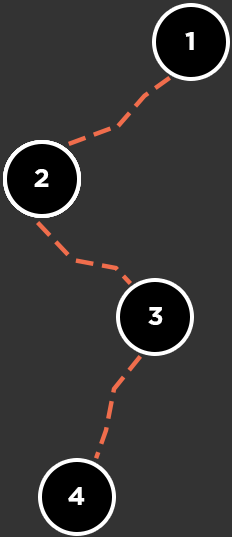
<style>
.page{position:relative;width:232px;height:537px;background:#333333}
.page>*{position:absolute;margin:0}
.t1{font:26px "HomepageBaukasten-Bold";letter-spacing:0.08em;color:#ffffff}
</style>
<div class="page">
<p class="t1" style="left:185px;top:32px;width:9px;height:18px">1</p>
<p class="t1" style="left:34px;top:169px;width:15px;height:18px">2</p>
<p class="t1" style="left:148px;top:307px;width:15px;height:18px">3</p>
<p class="t1" style="left:68px;top:487px;width:17px;height:18px">4</p>
</div>
